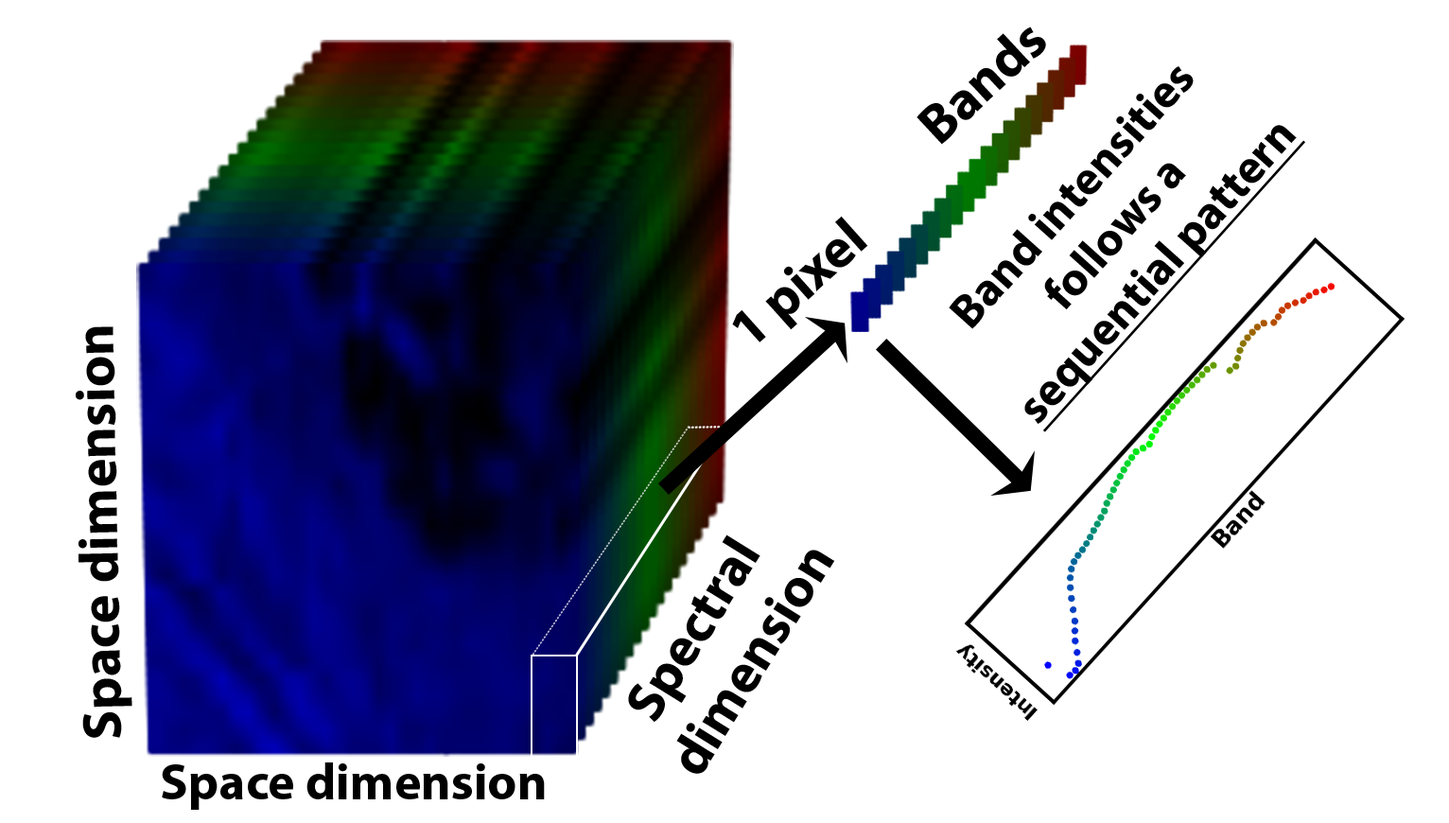
<style>
.page{position:relative;width:1449px;height:823px;background:#ffffff}
.page>*{position:absolute;margin:0}
.t1{font:55.2px "MyriadPro-Bold";color:#000000}
.t2{font:47.3px "MyriadPro-Bold";color:#000000}
.t3{font:47.3px "MyriadPro-Bold";color:#000000;text-decoration:underline}
.t4{font:51.2px "MyriadPro-Bold";color:#000000}
</style>
<div class="page">
<p class="t1" style="left:917px;top:26px;width:129px;height:119px;rotate:-43deg">Bands</p>
<p class="t2" style="left:949px;top:66px;width:356px;height:366px;text-align:center;rotate:-48deg">Band intensities <br>follows a <br><span class="t3">sequential pattern</span></p>
<p class="t1" style="left:732px;top:216px;width:136px;height:126px;rotate:-42deg">1 pixel</p>
<p class="t1" style="left:76px;top:326px;width:56px;height:412px;rotate:-91deg">Space dimension</p>
<p class="t1" style="left:628px;top:534px;width:207px;height:240px;text-align:center;rotate:-58deg">Spectral <br>dimension</p>
<p class="t4" style="left:162px;top:762px;width:383px;height:48px">Space dimension</p>
</div>
